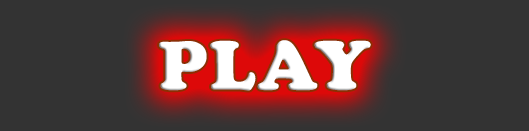
<style>
.page{position:relative;width:529px;height:131px;background:#333333}
.page>*{position:absolute;margin:0}
.t1{font:72px "CooperBlack";letter-spacing:0.025em;color:#ffffff}
</style>
<div class="page">
<p class="t1" style="left:159px;top:40px;width:212px;height:51px">PLAY</p>
</div>
